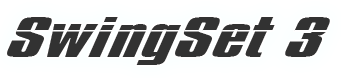
<style>
.page{position:relative;width:341px;height:78px;background:#323232}
.page>*{position:absolute;margin:0}
.t1{font:49.1px "Impossible-1000";color:#323232}
</style>
<div class="page">
<p class="t1" style="left:7px;top:17px;width:323px;height:48px">SwingSet 3</p>
</div>
